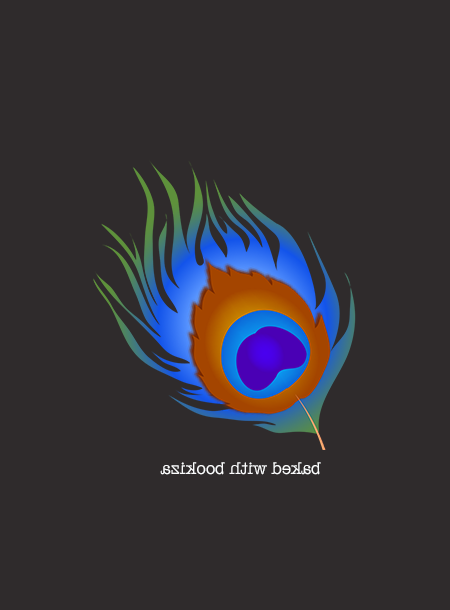
<style>
.page{position:relative;width:450px;height:610px;background:#2f2b2c}
.page>*{position:absolute;margin:0}
.t1{font:17.4px "AmericanTypewriter";color:#fbfcfd}
</style>
<div class="page">
<p class="t1" style="left:160px;top:462px;width:161px;height:13px;rotate:180deg">baked with bookiza</p>
</div>
